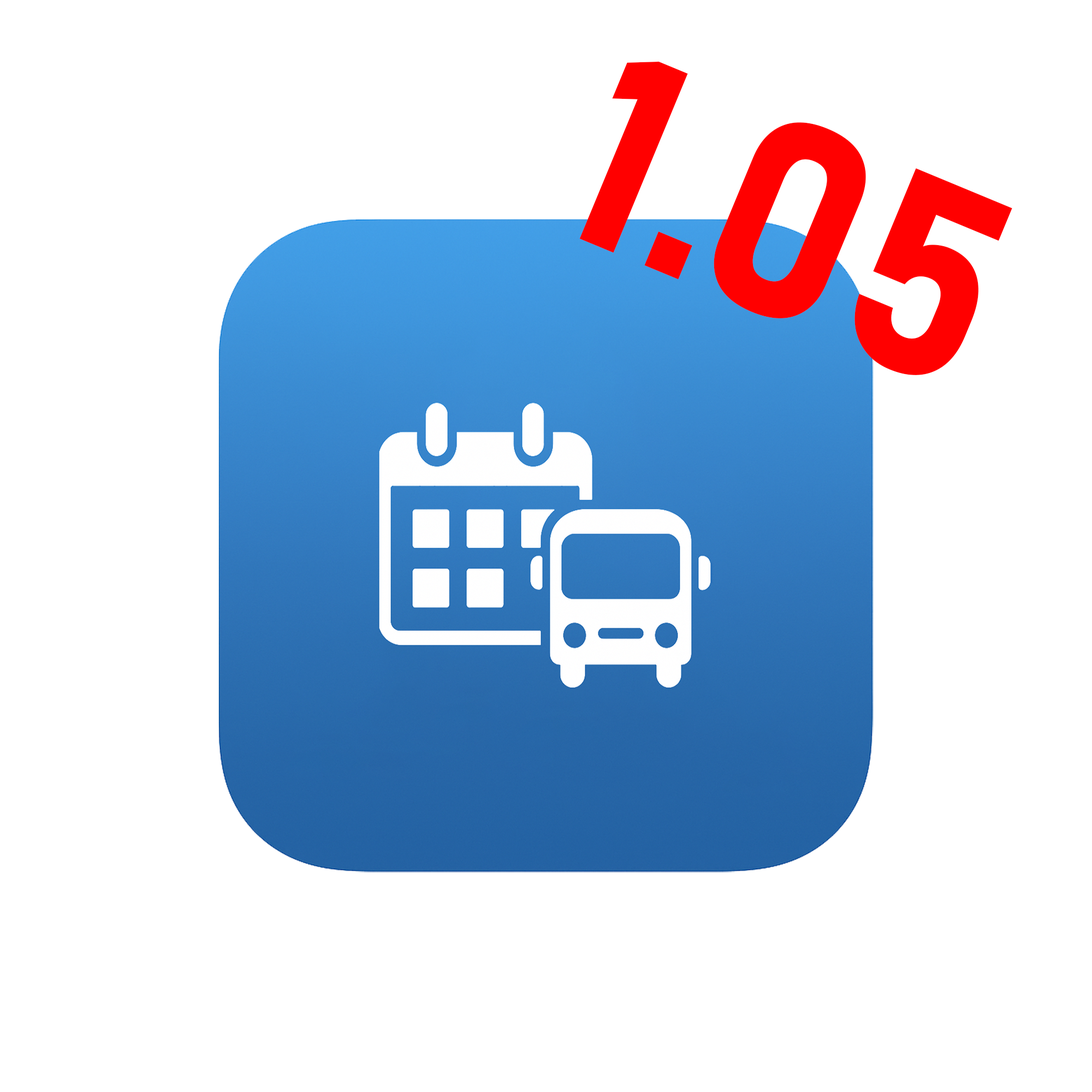
<style>
.page{position:relative;width:1092px;height:1092px;background:#ffffff}
.page>*{position:absolute;margin:0}
.t1{font:273px "Bahnschrift-Bold";color:#ff0000;text-transform:uppercase}
</style>
<div class="page">
<p class="t1" style="left:579px;top:61px;width:433px;height:314px;rotate:23deg">1.05</p>
</div>
